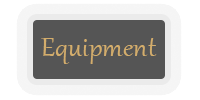
<style>
.page{position:relative;width:200px;height:100px;background:#555555}
.page>*{position:absolute;margin:0}
.t1{font:33.3px "Gabriola";color:#d3ad6c}
</style>
<div class="page">
<p class="t1" style="left:41px;top:38px;width:116px;height:26px">Equipment</p>
</div>
